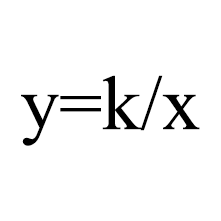
<style>
.page{position:relative;width:221px;height:221px;background:#ffffff}
.page>*{position:absolute;margin:0}
.t1{font:76.7px "TimesNewRomanPSMT";color:#000000}
</style>
<div class="page">
<p class="t1" style="left:21px;top:75px;width:179px;height:71px">y=k/x</p>
</div>
